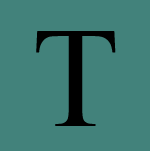
<style>
.page{position:relative;width:150px;height:151px;background:#42827b}
.page>*{position:absolute;margin:0}
.t1{font:142.5px "TimesNewRomanPSMT";color:#000000}
</style>
<div class="page">
<p class="t1" style="left:36px;top:31px;width:80px;height:95px">T</p>
</div>
